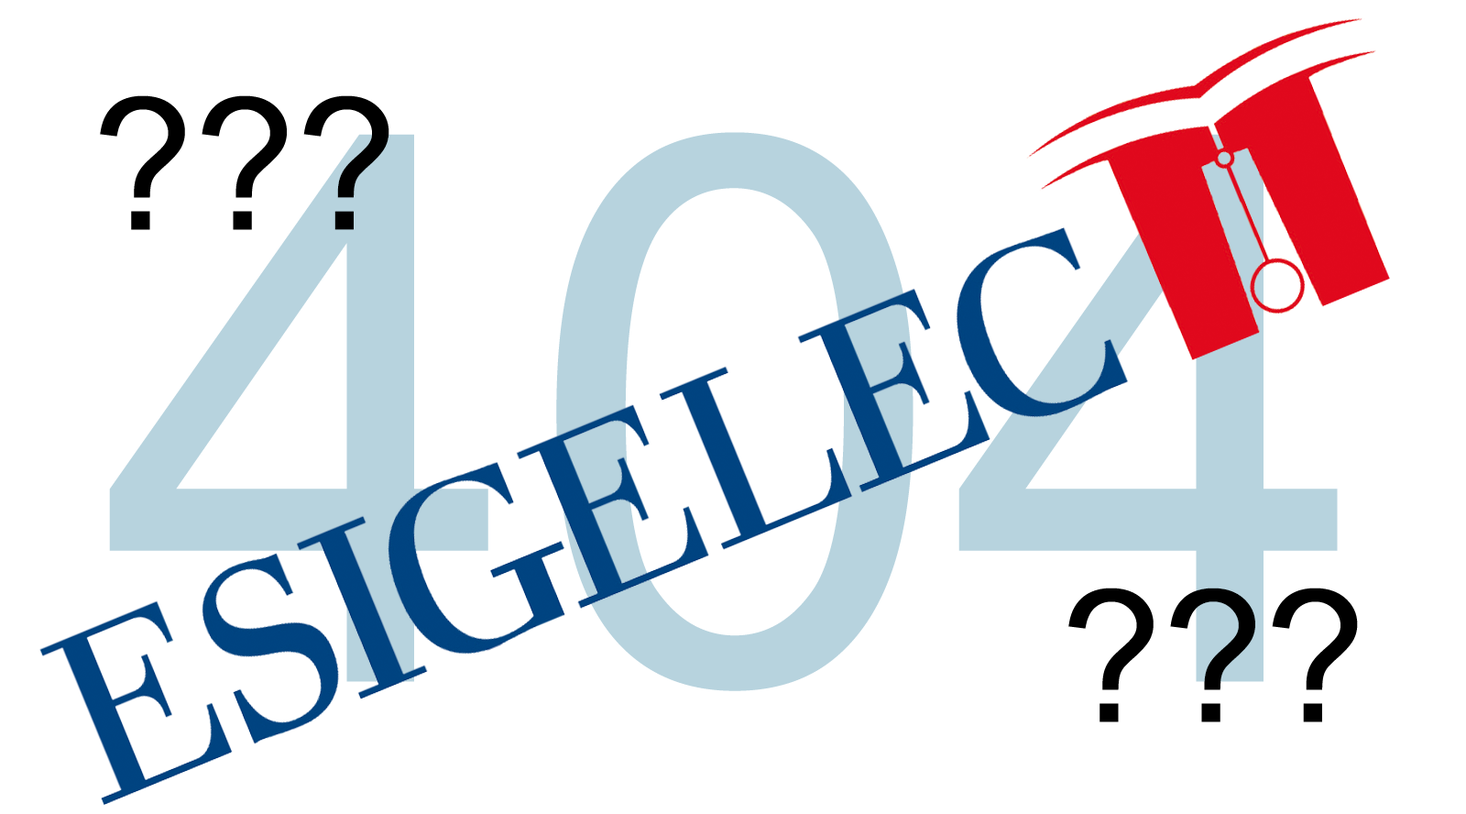
<style>
.page{position:relative;width:1466px;height:814px;background:#ffffff}
.page>*{position:absolute;margin:0}
.t1{font:183.2px "ArialMT";color:#000000}
.t2{font:763.4px "ArialMT";color:#b7d3de}
</style>
<div class="page">
<p class="t1" style="left:100px;top:95px;width:289px;height:135px">???</p>
<p class="t2" style="left:109px;top:132px;width:1229px;height:559px">404</p>
<p class="t1" style="left:1068px;top:587px;width:290px;height:135px">???</p>
</div>
